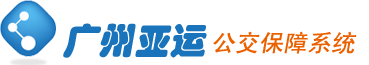
<style>
.page{position:relative;width:369px;height:65px;background:#ffffff}
.page>*{position:absolute;margin:0}
.t1{font:36px "STHupo";color:#1a74bb;font-style:italic}
.t2{font:24px "SimHei";color:#eb6100;font-style:italic}
.t3{font:32px "STHupo";color:#1a74bb;font-style:italic}
</style>
<div class="page">
<p class="t1" style="left:63px;top:23px;width:144px;height:35px">广州亚运</p>
<p class="t2" style="left:213px;top:31px;width:144px;height:23px"><span class="t3">               </span>公交保障系统</p>
</div>
